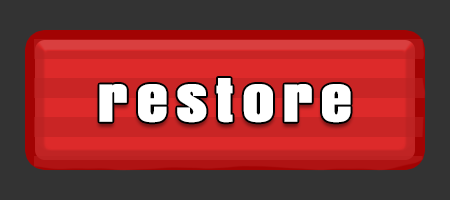
<style>
.page{position:relative;width:450px;height:200px;background:#333333}
.page>*{position:absolute;margin:0}
.t1{font:50px "Anton";letter-spacing:0.125em;color:#ffffff;font-weight:bold;scale:1.25 1}
</style>
<div class="page">
<p class="t1" style="left:99px;top:78px;width:252px;height:45px">restore</p>
</div>
